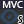
<style>
.page{position:relative;width:24px;height:24px;background:#333333}
.page>*{position:absolute;margin:0}
.t1{font:9px "MicrosoftYaHei";color:#ffffff}
.t2{font:9px "AdobeHeitiStd-Regular";color:#000000}
</style>
<div class="page">
<p class="t1" style="left:3px;top:1px;width:20px;height:7px">MVC</p>
<p class="t2" style="left:18px;top:16px;width:5px;height:7px">S</p>
</div>
